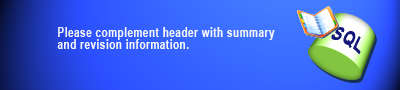
<style>
.page{position:relative;width:400px;height:90px}
.page>*{position:absolute;margin:0}
.t1{font:13px "Arial-BoldMT";letter-spacing:0.05em;color:#f5f6f9;scale:0.77 1}
.t2{font:19.6px "Arial-BoldMT";letter-spacing:0.05em;color:#121777;scale:0.77 1}
</style>
<div class="page">
<p class="t1" style="left:57px;top:27px;width:218px;height:22px">Please complement header with summary and revision information.</p>
<p class="t2" style="left:331px;top:27px;width:30px;height:28px;rotate:28deg">SQL</p>
</div>
